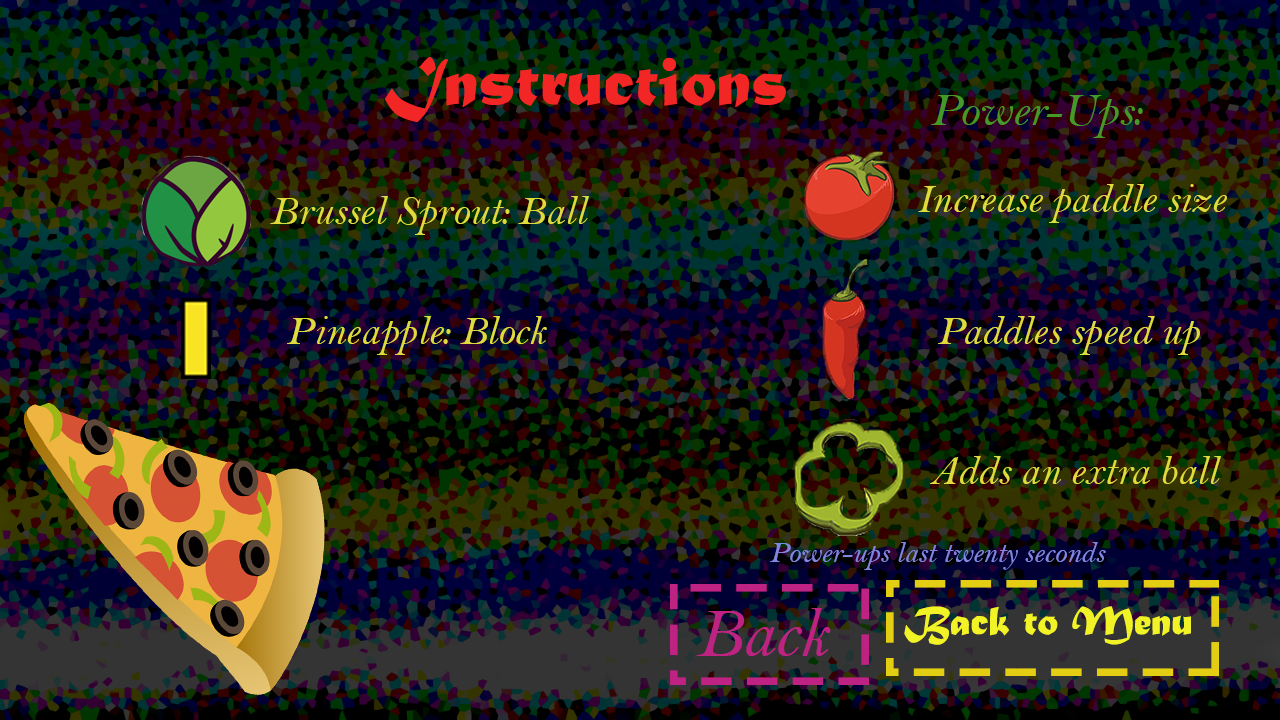
<style>
.page{position:relative;width:1280px;height:720px}
.page>*{position:absolute;margin:0}
.t1{font:48px "BellMTItalic";color:#459929}
.t2{font:42px "BellMTItalic";color:#e0db3c}
.t3{font:30px "BellMTItalic";color:#8186e0}
.t4{font:72px "BellMTItalic";color:#be2282}
</style>
<div class="page">
<p class="t1" style="left:931px;top:95px;width:212px;height:43px">Power-Ups:</p>
<p class="t2" style="left:918px;top:184px;width:309px;height:39px">Increase paddle size</p>
<p class="t2" style="left:270px;top:196px;width:319px;height:39px">Brussel Sprout: Ball</p>
<p class="t2" style="left:287px;top:316px;width:260px;height:39px">Pineapple: Block</p>
<p class="t2" style="left:938px;top:316px;width:262px;height:39px">Paddles speed up</p>
<p class="t2" style="left:930px;top:456px;width:291px;height:28px">Adds an extra ball</p>
<p class="t3" style="left:770px;top:542px;width:336px;height:28px">Power-ups last twenty seconds</p>
<p class="t4" style="left:696px;top:608px;width:135px;height:48px">Back</p>
</div>
